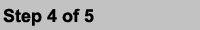
<style>
.page{position:relative;width:200px;height:30px;background:#c2c2c2}
.page>*{position:absolute;margin:0}
.t1{font:18px "Arial-BoldMT";color:#000000}
</style>
<div class="page">
<p class="t1" style="left:3px;top:8px;width:91px;height:18px">Step 4 of 5</p>
</div>
